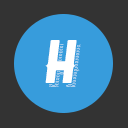
<style>
.page{position:relative;width:128px;height:128px;background:#333333}
.page>*{position:absolute;margin:0}
.t1{font:58.4px "Ranger-Italic-Shadow";letter-spacing:0.025em;color:#ffffff}
</style>
<div class="page">
<p class="t1" style="left:45px;top:40px;width:36px;height:47px">H</p>
</div>
